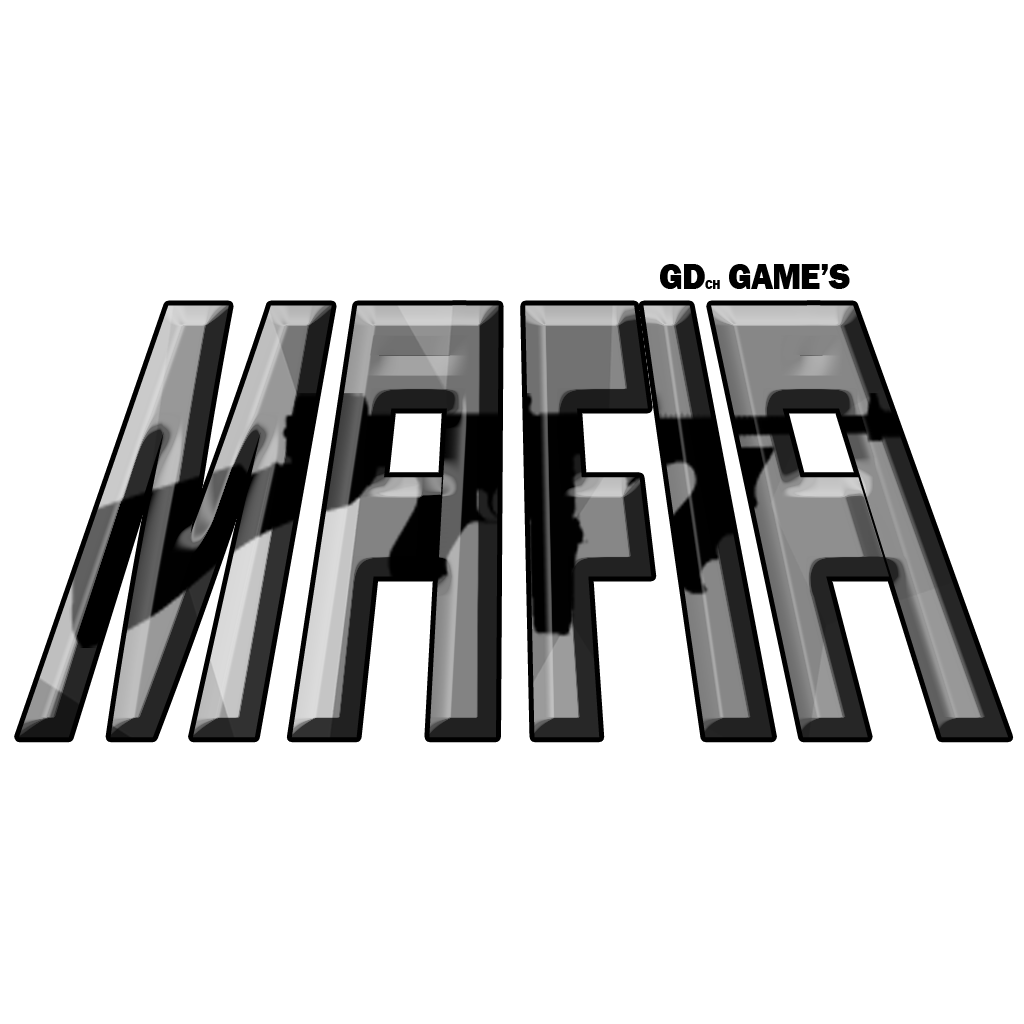
<style>
.page{position:relative;width:1024px;height:1024px;background:#ffffff}
.page>*{position:absolute;margin:0}
.t1{font:36.9px "FranklinGothic-Heavy";letter-spacing:-0.02em;color:#000000;scale:0.94 1}
.t2{font:12.5px "FranklinGothic-Heavy";letter-spacing:-0.02em;color:#000000;scale:0.94 1}
.t3{font:648.3px "FranklinGothic-Heavy";letter-spacing:-0.02em;scale:0.44 1}
.t4{font:648.3px "FranklinGothic-Heavy";scale:0.44 1}
.t5{font:648.3px "FranklinGothic-Heavy";letter-spacing:-0.123em;text-transform:uppercase;scale:0.44 1}
.t6{font:648.3px "FranklinGothic-Heavy";letter-spacing:0.003em;text-transform:uppercase;scale:0.44 1}
.t7{font:648.3px "FranklinGothic-Heavy";letter-spacing:-0.12em;scale:0.44 1}
</style>
<div class="page">
<p class="t1" style="left:660px;top:264px;width:190px;height:25px">GD<span class="t2">CH</span> GAME’S</p>
<p class="t3" style="left:19px;top:305px;width:990px;height:433px"><span class="t4">M</span><span class="t5">F</span><span class="t6">I</span>FI<span class="t7">FI</span></p>
</div>
